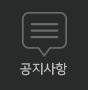
<style>
.page{position:relative;width:88px;height:90px;background:#292b2a}
.page>*{position:absolute;margin:0}
.t1{font:13px "NanumSquareR";color:#c7c7c7}
</style>
<div class="page">
<p class="t1" style="left:20px;top:62px;width:47px;height:14px">공지사항</p>
</div>
